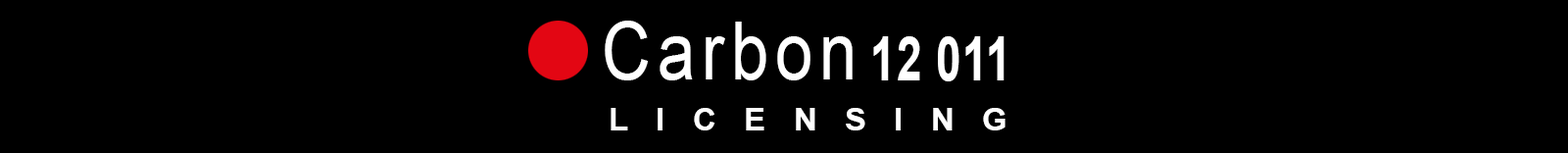
<style>
.page{position:relative;width:1568px;height:153px;background:#000000}
.page>*{position:absolute;margin:0}
.t1{font:80.4px "ArialMT";letter-spacing:0.1em;color:#ffffff;scale:0.84 1}
.t2{font:60.6px "Arial-BoldMT";letter-spacing:0.02em;color:#ffffff;scale:0.75 1}
.t3{font:31.4px "Arial-BoldMT";letter-spacing:0.86em;color:#ffffff;scale:1.03 1}
</style>
<div class="page">
<p class="t1" style="left:605px;top:21px;width:248px;height:59px">Carbon</p>
<p class="t2" style="left:873px;top:36px;width:131px;height:45px">12 011</p>
<p class="t3" style="left:611px;top:108px;width:394px;height:22px">LICENSING</p>
</div>
